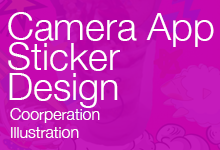
<style>
.page{position:relative;width:220px;height:150px}
.page>*{position:absolute;margin:0}
.t1{font:38px/30px "HelveticaNeue-Light";color:#ffffff}
.t2{font:16px/18px "HelveticaNeue-Light";color:#ffffff}
</style>
<div class="page">
<p class="t1" style="left:8px;top:12px;width:206px;height:96px">Camera App<br>Sticker<br>Design</p>
<p class="t2" style="left:10px;top:108px;width:90px;height:30px">Coorperation<br>Illustration</p>
</div>
